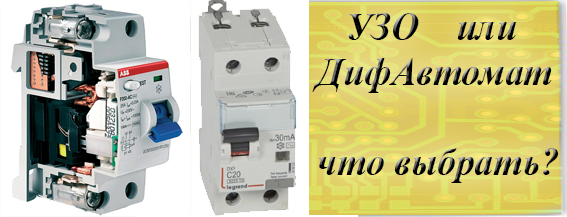
<style>
.page{position:relative;width:567px;height:217px}
.page>*{position:absolute;margin:0}
.t1{font:37.7px "TimesNewRomanPS-BoldItalicMT"}
</style>
<div class="page">
<p class="t1" style="left:312px;top:13px;width:247px;height:170px;text-align:right">УЗО    или ДифАвтомат<br><br>что выбрать?</p>
</div>
